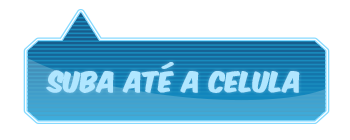
<style>
.page{position:relative;width:350px;height:140px;background:#ffffff}
.page>*{position:absolute;margin:0}
.t1{font:24px "KomikaAxis";color:#b0e6ff;font-weight:bold}
</style>
<div class="page">
<p class="t1" style="left:46px;top:62px;width:254px;height:31px">suba até a celula</p>
</div>
